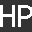
<style>
.page{position:relative;width:32px;height:32px;background:#333333}
.page>*{position:absolute;margin:0}
.t1{font:35px "Consolas";letter-spacing:-0.08em;color:#ffffff}
</style>
<div class="page">
<p class="t1" style="left:0px;top:5px;width:32px;height:22px">HP</p>
</div>
